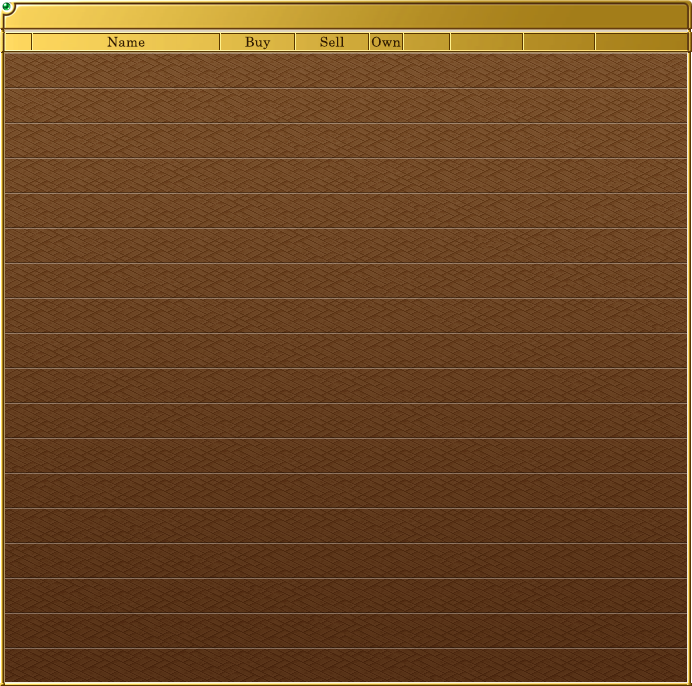
<style>
.page{position:relative;width:692px;height:686px}
.page>*{position:absolute;margin:0}
.t1{font:13.3px "CenturySchoolbook";letter-spacing:0.025em;color:#321a02}
</style>
<div class="page">
<p class="t1" style="left:107px;top:36px;width:38px;height:11px">Name</p>
<p class="t1" style="left:245px;top:36px;width:26px;height:14px">Buy</p>
<p class="t1" style="left:320px;top:36px;width:24px;height:11px">Sell</p>
<p class="t1" style="left:371px;top:36px;width:30px;height:11px">Own</p>
</div>
